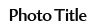
<style>
.page{position:relative;width:96px;height:24px;background:#ffffff}
.page>*{position:absolute;margin:0}
.t1{font:17.3px "AmiraParadiso";letter-spacing:-0.04em;color:#000000}
</style>
<div class="page">
<p class="t1" style="left:9px;top:8px;width:78px;height:13px;opacity:0.96">Photo Title</p>
</div>
